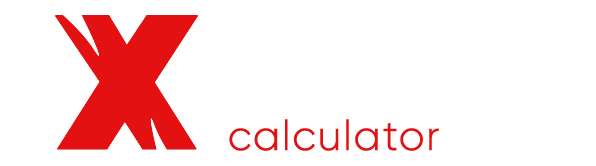
<style>
.page{position:relative;width:596px;height:166px;background:#ffffff}
.page>*{position:absolute;margin:0}
.t1{font:166.7px "SansPosterBoldJL";letter-spacing:0.02em;color:#e31111;font-weight:bold}
.t2{font:41.7px "Gilroy-Light";letter-spacing:0.02em;color:#e31111;font-weight:bold}
</style>
<div class="page">
<p class="t1" style="left:55px;top:15px;width:143px;height:135px">X</p>
<p class="t2" style="left:229px;top:119px;width:210px;height:32px">calculator</p>
</div>
